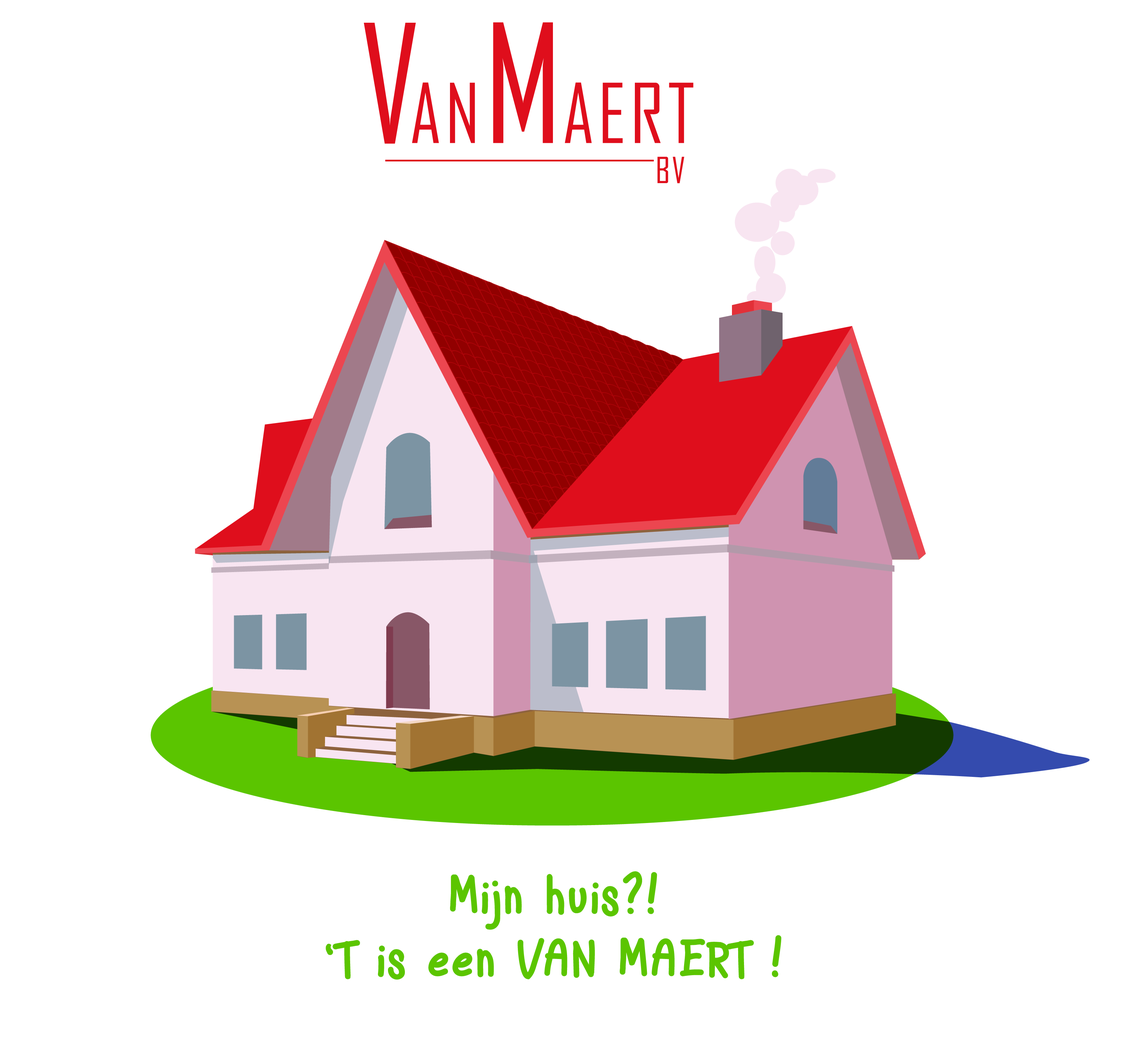
<style>
.page{position:relative;width:1142px;height:1044px;background:#ffffff}
.page>*{position:absolute;margin:0}
.t1{font:157.8px "AgencyFB-Reg";letter-spacing:0.05em;color:#df0e1c}
.t2{font:78.9px "AgencyFB-Reg";letter-spacing:0.05em;color:#df0e1c}
.t3{font:157.8px "AgencyFB-Reg";color:#df0e1c}
.t4{font:34.4px "AgencyFB-Reg";letter-spacing:0.05em;color:#df0e1c}
.t5{font:51.6px/63.1px "Dion";letter-spacing:0.05em;color:#5bc500}
</style>
<div class="page">
<p class="t1" style="left:364px;top:23px;width:52px;height:121px">V</p>
<p class="t2" style="left:412px;top:22px;width:281px;height:121px">AN<span class="t3">M</span>AERT</p>
<p class="t4" style="left:657px;top:157px;width:27px;height:26px">BV</p>
<p class="t5" style="left:326px;top:871px;width:456px;height:109px;text-align:center">Mijn huis?!<br>‘T is een VAN MAERT !</p>
</div>
